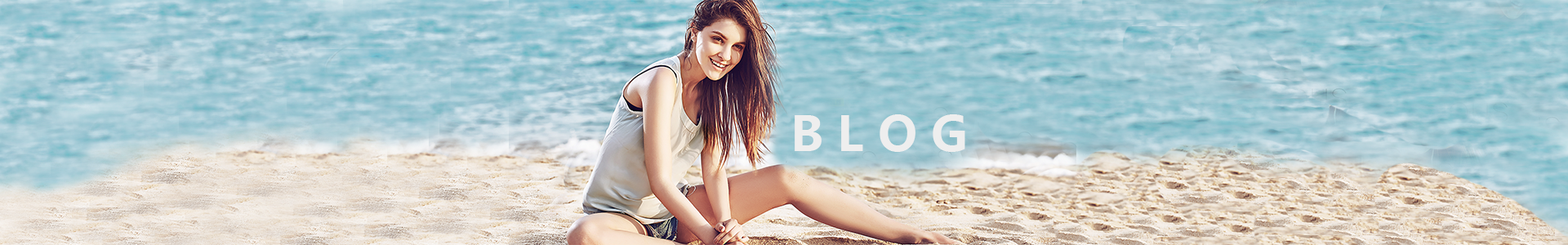
<style>
.page{position:relative;width:1568px;height:245px}
.page>*{position:absolute;margin:0}
.t1{font:35.2px "MicrosoftYaHei-Bold";color:#eeeeee}
</style>
<div class="page">
<p class="t1" style="left:795px;top:114px;width:170px;height:38px">B L O G</p>
</div>
